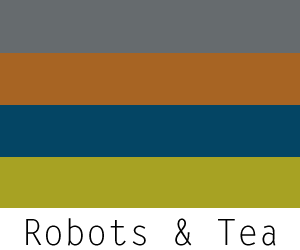
<style>
.page{position:relative;width:300px;height:250px;background:#666b6e}
.page>*{position:absolute;margin:0}
.t1{font:36px "LetterGothicStd";color:#000000}
</style>
<div class="page">
<p class="t1" style="left:26px;top:218px;width:250px;height:28px">Robots &amp; Tea</p>
</div>
